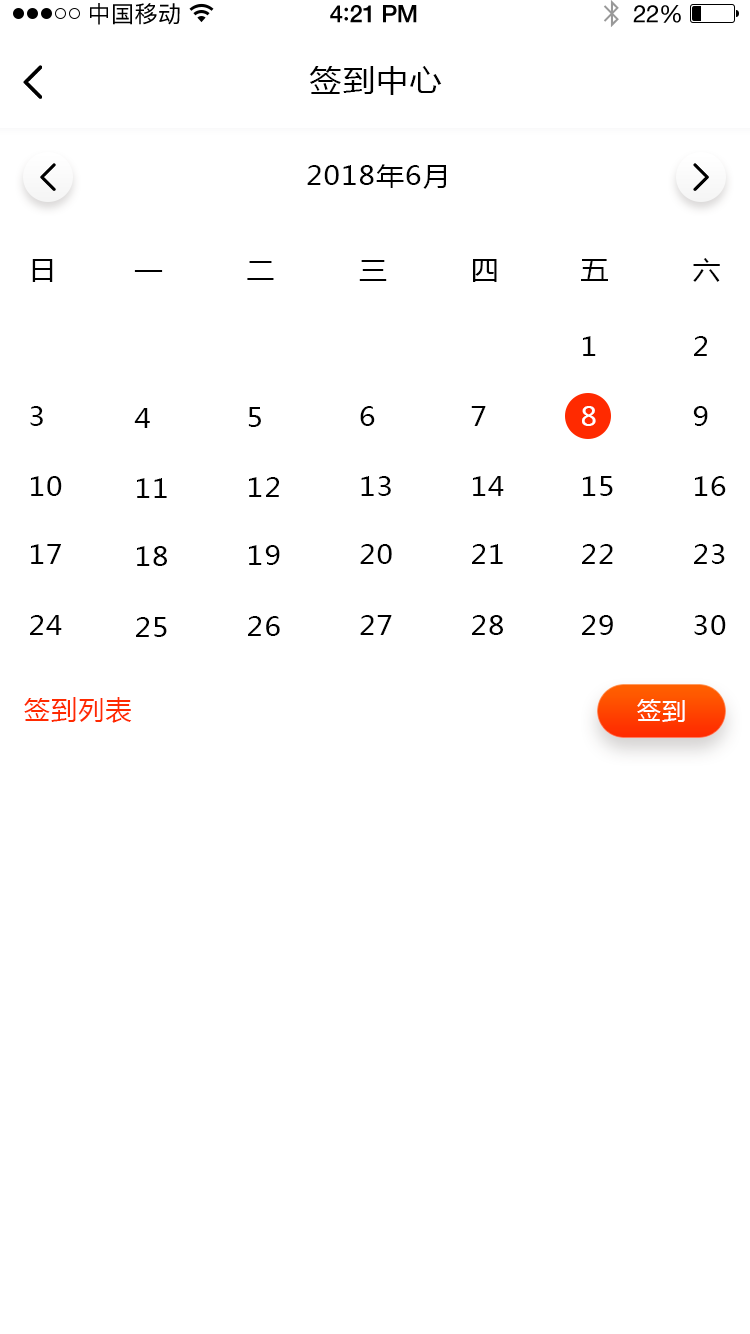
<style>
.page{position:relative;width:750px;height:1334px;background:#ffffff}
.page>*{position:absolute;margin:0}
.t1{font:23px "PingFangSC-Regular";letter-spacing:0.02em;color:#000000}
.t2{font:24px "HelveticaNeue-Medium";letter-spacing:-0.02em;color:#000000}
.t3{font:26px "Avenir-Medium";letter-spacing:-0.02em;color:#000000}
.t4{font:24px "HelveticaNeue";letter-spacing:-0.02em;color:#000000}
.t5{font:30px "MicrosoftYaHei";letter-spacing:0.05em;color:#000000;scale:1.06 1}
.t6{font:26px "MicrosoftYaHei";letter-spacing:0.05em;color:#000000;scale:1.06 1}
.t7{font:26px "MicrosoftYaHei";letter-spacing:0.05em;color:#ffffff;scale:1.06 1}
.t8{font:26px "MicrosoftYaHei";letter-spacing:0.05em;color:#ff2a00;text-transform:uppercase}
.t9{font:24px "MicrosoftYaHei";letter-spacing:0.05em;color:#ffffff;text-transform:uppercase}
</style>
<div class="page">
<p class="t1" style="left:90px;top:3px;width:90px;height:22px">中国移动</p>
<p class="t2" style="left:330px;top:5px;width:87px;height:18px">4<span class="t3">:</span>21 PM</p>
<p class="t4" style="left:633px;top:5px;width:48px;height:18px">22%</p>
<p class="t5" style="left:309px;top:66px;width:133px;height:29px">签到中心</p>
<p class="t6" style="left:307px;top:164px;width:139px;height:25px">2018年6月</p>
<p class="t6" style="left:32px;top:259px;width:21px;height:23px">日</p>
<p class="t6" style="left:134px;top:270px;width:29px;height:2px">一</p>
<p class="t6" style="left:247px;top:261px;width:27px;height:19px">二</p>
<p class="t6" style="left:359px;top:260px;width:28px;height:21px">三</p>
<p class="t6" style="left:473px;top:259px;width:24px;height:23px">四</p>
<p class="t6" style="left:581px;top:259px;width:27px;height:22px">五</p>
<p class="t6" style="left:693px;top:258px;width:27px;height:24px">六</p>
<p class="t6" style="left:583px;top:336px;width:13px;height:20px">1</p>
<p class="t6" style="left:694px;top:336px;width:13px;height:20px">2</p>
<p class="t6" style="left:30px;top:406px;width:13px;height:20px">3</p>
<p class="t6" style="left:134px;top:408px;width:16px;height:20px">4</p>
<p class="t6" style="left:248px;top:407px;width:13px;height:20px">5</p>
<p class="t6" style="left:360px;top:406px;width:15px;height:20px">6</p>
<p class="t6" style="left:471px;top:406px;width:15px;height:20px">7</p>
<p class="t7" style="left:582px;top:406px;width:14px;height:20px">8</p>
<p class="t6" style="left:693px;top:406px;width:15px;height:20px">9</p>
<p class="t6" style="left:31px;top:476px;width:31px;height:20px">10</p>
<p class="t6" style="left:137px;top:478px;width:30px;height:20px">11</p>
<p class="t6" style="left:249px;top:477px;width:30px;height:20px">12</p>
<p class="t6" style="left:361px;top:476px;width:30px;height:20px">13</p>
<p class="t6" style="left:473px;top:476px;width:31px;height:20px">14</p>
<p class="t6" style="left:583px;top:476px;width:30px;height:20px">15</p>
<p class="t6" style="left:695px;top:476px;width:31px;height:20px">16</p>
<p class="t6" style="left:31px;top:544px;width:30px;height:20px">17</p>
<p class="t6" style="left:249px;top:545px;width:31px;height:20px">19</p>
<p class="t6" style="left:360px;top:544px;width:32px;height:20px">20</p>
<p class="t6" style="left:472px;top:544px;width:31px;height:20px">21</p>
<p class="t6" style="left:582px;top:544px;width:31px;height:20px">22</p>
<p class="t6" style="left:694px;top:544px;width:31px;height:20px">23</p>
<p class="t6" style="left:137px;top:546px;width:30px;height:20px">18</p>
<p class="t6" style="left:30px;top:615px;width:32px;height:20px">24</p>
<p class="t6" style="left:136px;top:617px;width:31px;height:20px">25</p>
<p class="t6" style="left:248px;top:616px;width:32px;height:20px">26</p>
<p class="t6" style="left:360px;top:615px;width:32px;height:20px">27</p>
<p class="t6" style="left:472px;top:615px;width:31px;height:20px">28</p>
<p class="t6" style="left:582px;top:615px;width:31px;height:20px">29</p>
<p class="t6" style="left:694px;top:615px;width:32px;height:20px">30</p>
<p class="t8" style="left:24px;top:697px;width:108px;height:26px">签到列表</p>
<p class="t9" style="left:637px;top:699px;width:48px;height:23px">签到</p>
</div>
